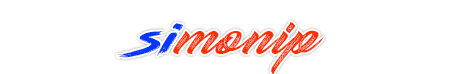
<style>
.page{position:relative;width:450px;height:74px;background:#ffffff}
.page>*{position:absolute;margin:0}
.t1{font:46.2px "SouthGardensPersonalUse";letter-spacing:0.02em;color:#ff3000;scale:1.36 1}
.t2{font:30.8px "RoadRage";letter-spacing:0.02em;color:#0137ff;scale:1.36 1}
</style>
<div class="page">
<p class="t1" style="left:117px;top:22px;width:207px;height:53px"><span class="t2">Si</span>monip</p>
</div>
